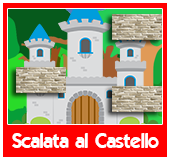
<style>
.page{position:relative;width:170px;height:160px;background:#ff0000}
.page>*{position:absolute;margin:0}
.t1{font:20px "ELEGANCE";color:#ffffff}
</style>
<div class="page">
<p class="t1" style="left:12px;top:133px;width:147px;height:15px">Scalata al Castello</p>
</div>
